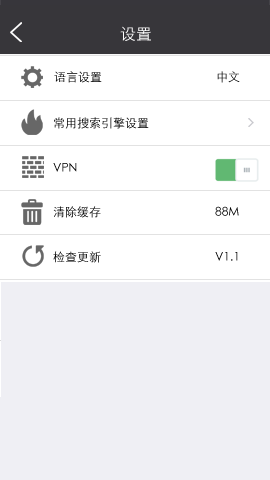
<style>
.page{position:relative;width:270px;height:480px;background:#ffffff}
.page>*{position:absolute;margin:0}
.t1{font:16px "STXihei";color:#ffffff}
.t2{font:12px "STXihei"}
.t3{font:12px "STXihei";color:#000000}
</style>
<div class="page">
<p class="t1" style="left:120px;top:26px;width:31px;height:15px">设置</p>
<p class="t2" style="left:54px;top:71px;width:186px;height:12px">语言设置                                      中文</p>
<p class="t2" style="left:54px;top:117px;width:95px;height:12px">常用搜索引擎设置</p>
<p class="t2" style="left:53px;top:163px;width:24px;height:9px">VPN</p>
<p class="t3" style="left:53px;top:206px;width:186px;height:12px">清除缓存                                      88M</p>
<p class="t3" style="left:53px;top:251px;width:185px;height:12px">检查更新                                      V1.1</p>
</div>
